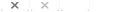
<style>
.page{position:relative;width:120px;height:12px;background:#ffffff}
.page>*{position:absolute;margin:0}
.t1{font:8.4px "Verdana";color:#747474;font-weight:bold;scale:1.39 1}
.t2{font:8.4px "Verdana";color:#bdbdbd;font-weight:bold;scale:1.39 1}
</style>
<div class="page">
<p class="t1" style="left:11px;top:2px;width:8px;height:7px">X</p>
<p class="t2" style="left:41px;top:2px;width:8px;height:7px">X</p>
</div>
